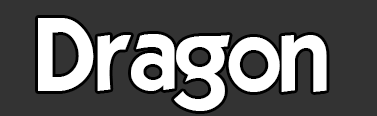
<style>
.page{position:relative;width:377px;height:116px;background:#333333}
.page>*{position:absolute;margin:0}
.t1{font:100px "ELEGANCE";color:#ffffff}
</style>
<div class="page">
<p class="t1" style="left:38px;top:18px;width:289px;height:93px">Dragon</p>
</div>
